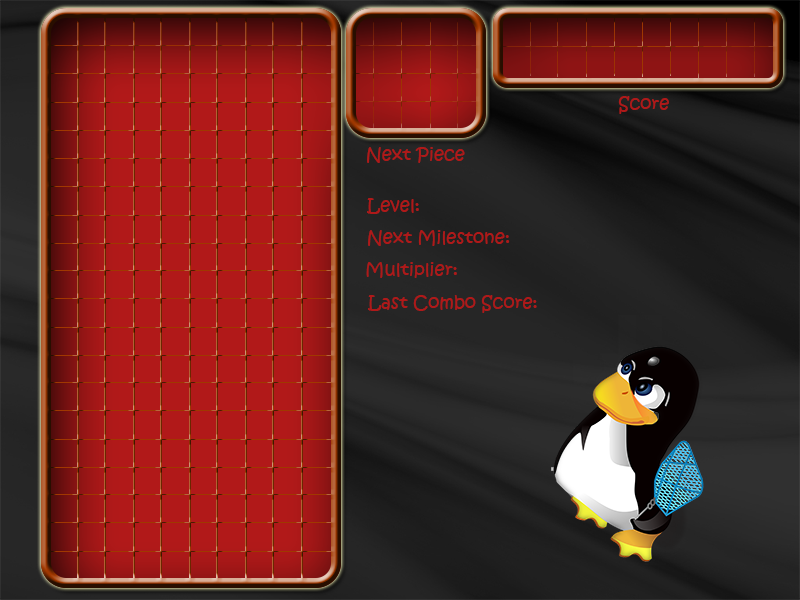
<style>
.page{position:relative;width:800px;height:600px}
.page>*{position:absolute;margin:0}
.t1{font:18px "KristenITC-Regular";color:#af1919}
</style>
<div class="page">
<p class="t1" style="left:618px;top:96px;width:51px;height:18px">Score</p>
<p class="t1" style="left:367px;top:147px;width:98px;height:16px">Next Piece</p>
<p class="t1" style="left:367px;top:198px;width:52px;height:16px">Level:</p>
<p class="t1" style="left:368px;top:230px;width:142px;height:16px">Next Milestone:</p>
<p class="t1" style="left:366px;top:262px;width:91px;height:16px">Multiplier:</p>
<p class="t1" style="left:368px;top:295px;width:169px;height:18px">Last Combo Score:</p>
</div>
